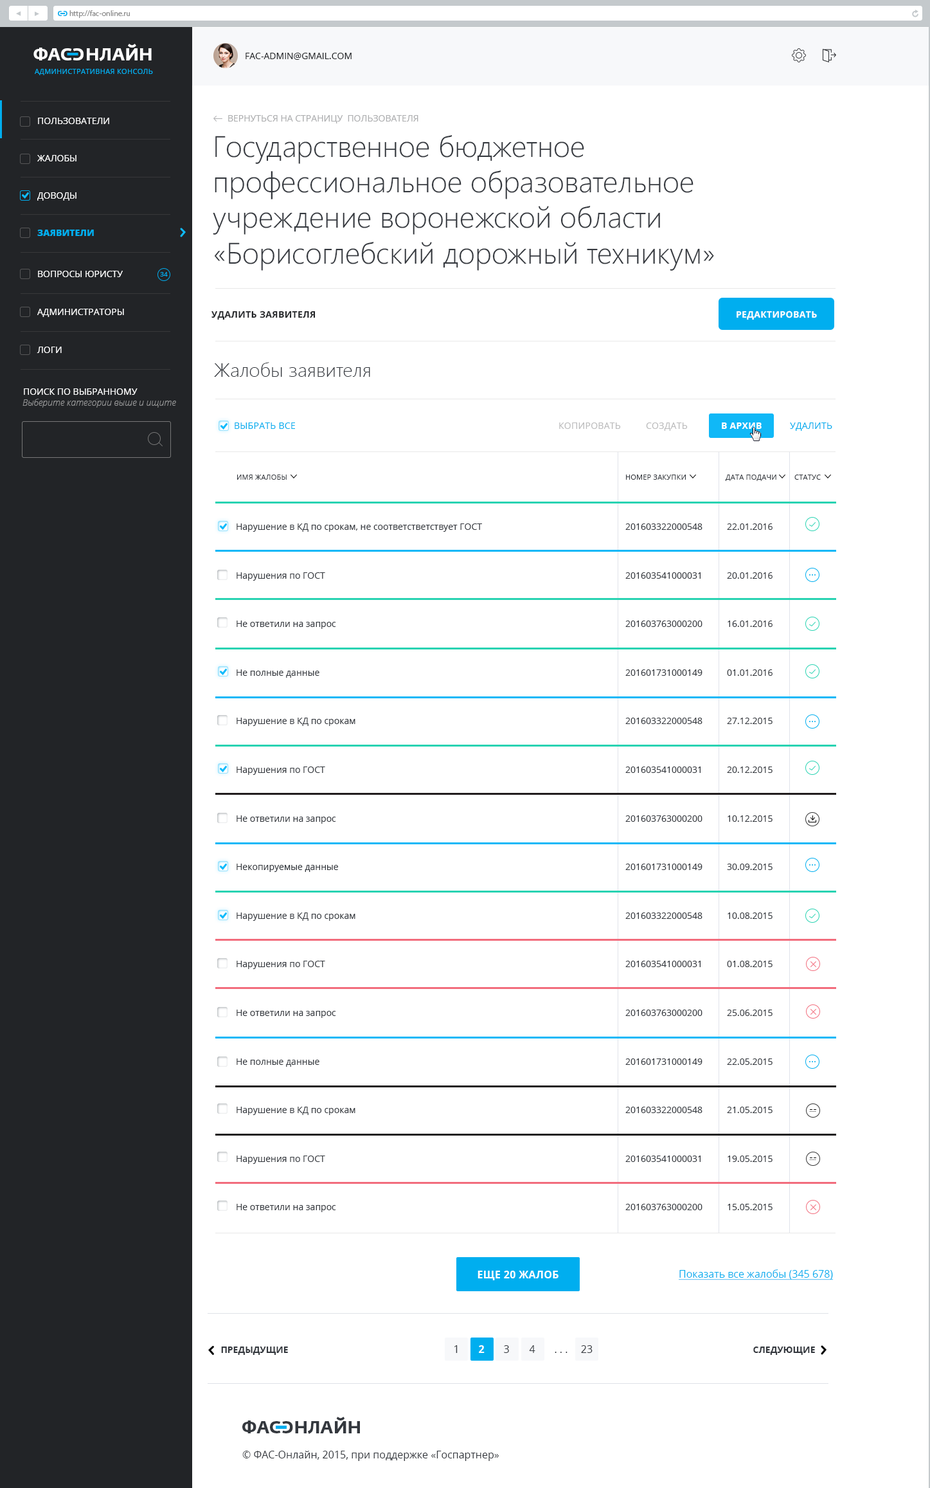
<style>
.page{position:relative;width:930px;height:1488px;background:#ffffff}
.page>*{position:absolute;margin:0}
.t1{font:6.4px "FedraSansPro-Bold";color:#00aeef;text-transform:uppercase}
.t2{font:7.7px "MyriadPro-Regular";color:#8d8d8d}
.t3{font:17.4px "FedraSansPro-Bold";color:#ffffff;text-transform:uppercase}
.t4{font:9px "OpenSans";color:#222427;text-transform:uppercase}
.t5{font:7.1px "OpenSans";letter-spacing:0.03em;color:#00aeef;text-transform:uppercase}
.t6{font:9px "OpenSans";color:#ffffff;text-transform:uppercase}
.t7{font:9px "OpenSans";color:#adaeb0;text-transform:uppercase}
.t8{font:29.6px "SegoeUI-Light";color:#34383e}
.t9{font:9px "OpenSans-Extrabold";color:#00aeef;text-transform:uppercase}
.t10{font:6.4px "OpenSans";color:#00aeef}
.t11{font:9px "OpenSans-Bold";letter-spacing:0.03em;color:#222427;text-transform:uppercase}
.t12{font:9px "OpenSans-Bold";letter-spacing:0.03em;color:#fefefe;text-transform:uppercase}
.t13{font:19.3px "SegoeUI-Light";color:#34383e}
.t14{font:9px "OpenSansLight-Italic";color:#959596}
.t15{font:9px "OpenSans";letter-spacing:0.02em;color:#00aeef;text-transform:uppercase}
.t16{font:9px "OpenSans";letter-spacing:0.02em;color:#bcbcbd;text-transform:uppercase}
.t17{font:9px "OpenSans-Bold";letter-spacing:0.02em;color:#ffffff;text-transform:uppercase}
.t18{font:7.1px "OpenSans";letter-spacing:0.02em;color:#34383e;text-transform:uppercase}
.t19{font:9px "OpenSans";color:#34383e}
.t20{font:9px "OpenSans";color:#34383e;text-transform:uppercase}
.t21{font:10.3px "OpenSans-Bold";letter-spacing:0.02em;color:#ffffff;text-transform:uppercase}
.t22{font:10.3px "OpenSans";color:#00aeef;text-decoration:underline}
.t23{font:9px "OpenSans-Bold";color:#34383e;text-transform:uppercase}
.t24{font:10.3px "OpenSans";color:#34383e}
.t25{font:10.3px "OpenSans-Bold";color:#ffffff}
.t26{font:17.4px "FedraSansPro-Bold";color:#34383e;text-transform:uppercase}
</style>
<div class="page">
<p class="t1" style="left:58px;top:11px;width:4px;height:5px">c</p>
<p class="t1" style="left:63px;top:11px;width:5px;height:5px;rotate:180deg">c</p>
<p class="t2" style="left:69px;top:10px;width:61px;height:8px">http://fac-online.ru</p>
<p class="t3" style="left:33px;top:44px;width:119px;height:17px">ФАc   НЛАЙН</p>
<p class="t3" style="left:73px;top:48px;width:11px;height:12px;rotate:180deg">c</p>
<p class="t4" style="left:246px;top:53px;width:106px;height:7px">FAC-Admin@gmail.com</p>
<p class="t5" style="left:35px;top:69px;width:118px;height:6px">Административная консоль</p>
<p class="t6" style="left:38px;top:118px;width:71px;height:6px">Пользователи</p>
<p class="t7" style="left:228px;top:115px;width:191px;height:8px">Вернуться на страницу  пользователя</p>
<p class="t8" style="left:213px;top:135px;width:501px;height:136px">Государственное бюджетное профессиональное образовательное учреждение воронежской области «Борисоглебский дорожный техникум»</p>
<p class="t6" style="left:37px;top:155px;width:39px;height:6px">жалобы</p>
<p class="t6" style="left:37px;top:192px;width:39px;height:9px">Доводы</p>
<p class="t9" style="left:37px;top:230px;width:57px;height:6px">ЗАявители</p>
<p class="t6" style="left:38px;top:271px;width:85px;height:6px">вопросы юристу</p>
<p class="t10" style="left:160px;top:272px;width:8px;height:4px">34</p>
<p class="t6" style="left:37px;top:309px;width:87px;height:8px">Администраторы</p>
<p class="t11" style="left:212px;top:310px;width:104px;height:10px">Удалить заявителя</p>
<p class="t12" style="left:737px;top:310px;width:80px;height:10px">Редактировать</p>
<p class="t6" style="left:37px;top:346px;width:25px;height:7px">логи</p>
<p class="t13" style="left:214px;top:362px;width:156px;height:15px">Жалобы заявителя</p>
<p class="t6" style="left:24px;top:388px;width:114px;height:7px">Поиск по выбранному</p>
<p class="t14" style="left:22px;top:399px;width:154px;height:9px">Выберите категории выше и ищите</p>
<p class="t15" style="left:235px;top:422px;width:60px;height:7px">Выбрать все</p>
<p class="t16" style="left:559px;top:422px;width:62px;height:7px">Копировать</p>
<p class="t16" style="left:646px;top:422px;width:42px;height:9px">Создать</p>
<p class="t17" style="left:722px;top:422px;width:40px;height:7px">В архив</p>
<p class="t15" style="left:790px;top:422px;width:43px;height:9px">Удалить</p>
<p class="t18" style="left:237px;top:474px;width:50px;height:6px">Имя жалобы</p>
<p class="t18" style="left:626px;top:474px;width:60px;height:6px">Номер закупки</p>
<p class="t18" style="left:725px;top:474px;width:52px;height:7px">дата подачи</p>
<p class="t18" style="left:795px;top:474px;width:26px;height:6px">Статус</p>
<p class="t19" style="left:237px;top:523px;width:245px;height:689px">Нарушение в КД по срокам, не соответстветствует ГОСТ<br>Нарушения по ГОСТ<br>Не ответили на запрос<br>Не полные данные<br>Нарушение в КД по срокам<br>Нарушения по ГОСТ<br>Не ответили на запрос<br>Некопируемые данные<br>Нарушение в КД по срокам<br>Нарушения по ГОСТ<br>Не ответили на запрос<br>Не полные данные<br>Нарушение в КД по срокам<br>Нарушения по ГОСТ<br>Не ответили на запрос</p>
<p class="t19" style="left:626px;top:523px;width:77px;height:687px">201603322000548 <br>201603541000031 <br>201603763000200<br>201601731000149<br>201603322000548 <br>201603541000031 <br>201603763000200<br>201601731000149<br>201603322000548 <br>201603541000031 <br>201603763000200<br>201601731000149<br>201603322000548 <br>201603541000031 <br>201603763000200</p>
<p class="t20" style="left:727px;top:523px;width:46px;height:687px">22.01.2016<br>20.01.2016<br>16.01.2016<br>01.01.2016<br>27.12.2015<br>20.12.2015<br>10.12.2015<br>30.09.2015<br>10.08.2015<br>01.08.2015<br>25.06.2015<br>22.05.2015<br>21.05.2015<br>19.05.2015<br>15.05.2015</p>
<p class="t21" style="left:478px;top:1270px;width:81px;height:10px">еще 20 жалоб</p>
<p class="t22" style="left:679px;top:1269px;width:155px;height:11px">Показать все жалобы (345 678)</p>
<p class="t23" style="left:221px;top:1346px;width:67px;height:8px">Предыдущие</p>
<p class="t24" style="left:455px;top:1345px;width:3px;height:8px">1</p>
<p class="t25" style="left:479px;top:1345px;width:6px;height:8px">2</p>
<p class="t24" style="left:504px;top:1345px;width:5px;height:8px">3</p>
<p class="t24" style="left:529px;top:1345px;width:7px;height:8px">4</p>
<p class="t24" style="left:581px;top:1345px;width:12px;height:8px">23</p>
<p class="t23" style="left:753px;top:1346px;width:62px;height:8px">Следующие</p>
<p class="t24" style="left:555px;top:1351px;width:13px;height:2px">. . .</p>
<p class="t26" style="left:242px;top:1416px;width:118px;height:18px">ФАc   НЛАЙН</p>
<p class="t26" style="left:282px;top:1421px;width:11px;height:12px;rotate:180deg">c</p>
<p class="t24" style="left:242px;top:1450px;width:257px;height:11px">© ФАС-Онлайн, 2015, при поддержке «Госпартнер»</p>
</div>
